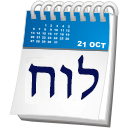
<style>
.page{position:relative;width:128px;height:128px;background:#ffffff}
.page>*{position:absolute;margin:0}
.t1{font:60px "Narkisim";color:#080f53;scale:0.96 1}
</style>
<div class="page">
<p class="t1" style="left:28px;top:55px;width:71px;height:45px;rotate:3deg">חול</p>
</div>
